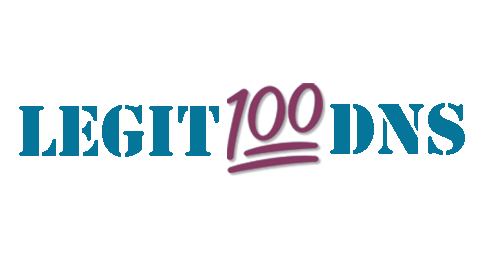
<style>
.page{position:relative;width:486px;height:256px;background:#ffffff}
.page>*{position:absolute;margin:0}
.t1{font:75px "Stencil";color:#05759a}
</style>
<div class="page">
<p class="t1" style="left:19px;top:105px;width:200px;height:52px">Legit</p>
<p class="t1" style="left:330px;top:103px;width:135px;height:52px">DNS</p>
</div>
